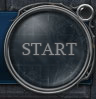
<style>
.page{position:relative;width:96px;height:99px}
.page>*{position:absolute;margin:0}
.t1{font:18px "Sylfaen";color:#888d90}
</style>
<div class="page">
<p class="t1" style="left:22px;top:43px;width:55px;height:12px">START</p>
</div>
